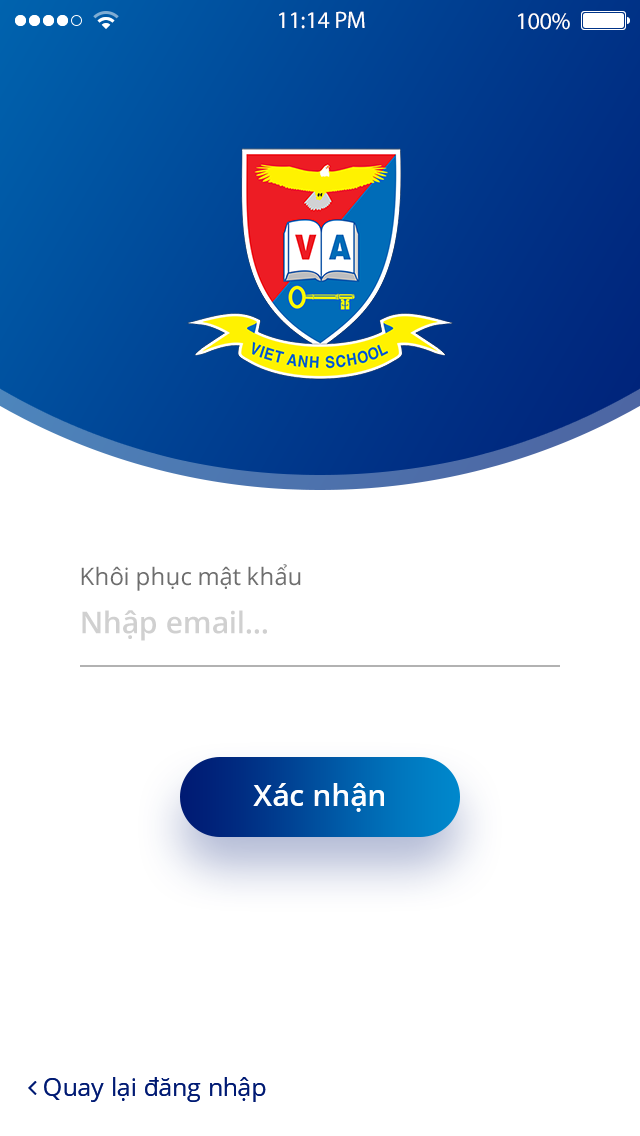
<style>
.page{position:relative;width:640px;height:1136px;background:#ffffff}
.page>*{position:absolute;margin:0}
.t1{font:24px "MyriadPro-Regular";color:#ffffff}
.t2{font:24px "OpenSans-Regular";color:#6e6e6e}
.t3{font:30px "OpenSans-SemiBold";color:#d0d0d0}
.t4{font:30px "OpenSans-SemiBold";color:#fefefe}
</style>
<div class="page">
<p class="t1" style="left:279px;top:11px;width:86px;height:18px">11:14 PM</p>
<p class="t1" style="left:518px;top:13px;width:52px;height:17px">100%</p>
<p class="t2" style="left:81px;top:564px;width:220px;height:27px">Khôi phục mật khẩu</p>
<p class="t3" style="left:82px;top:610px;width:185px;height:31px">Nhập email...</p>
<p class="t4" style="left:253px;top:783px;width:131px;height:29px">Xác nhận</p>
</div>
